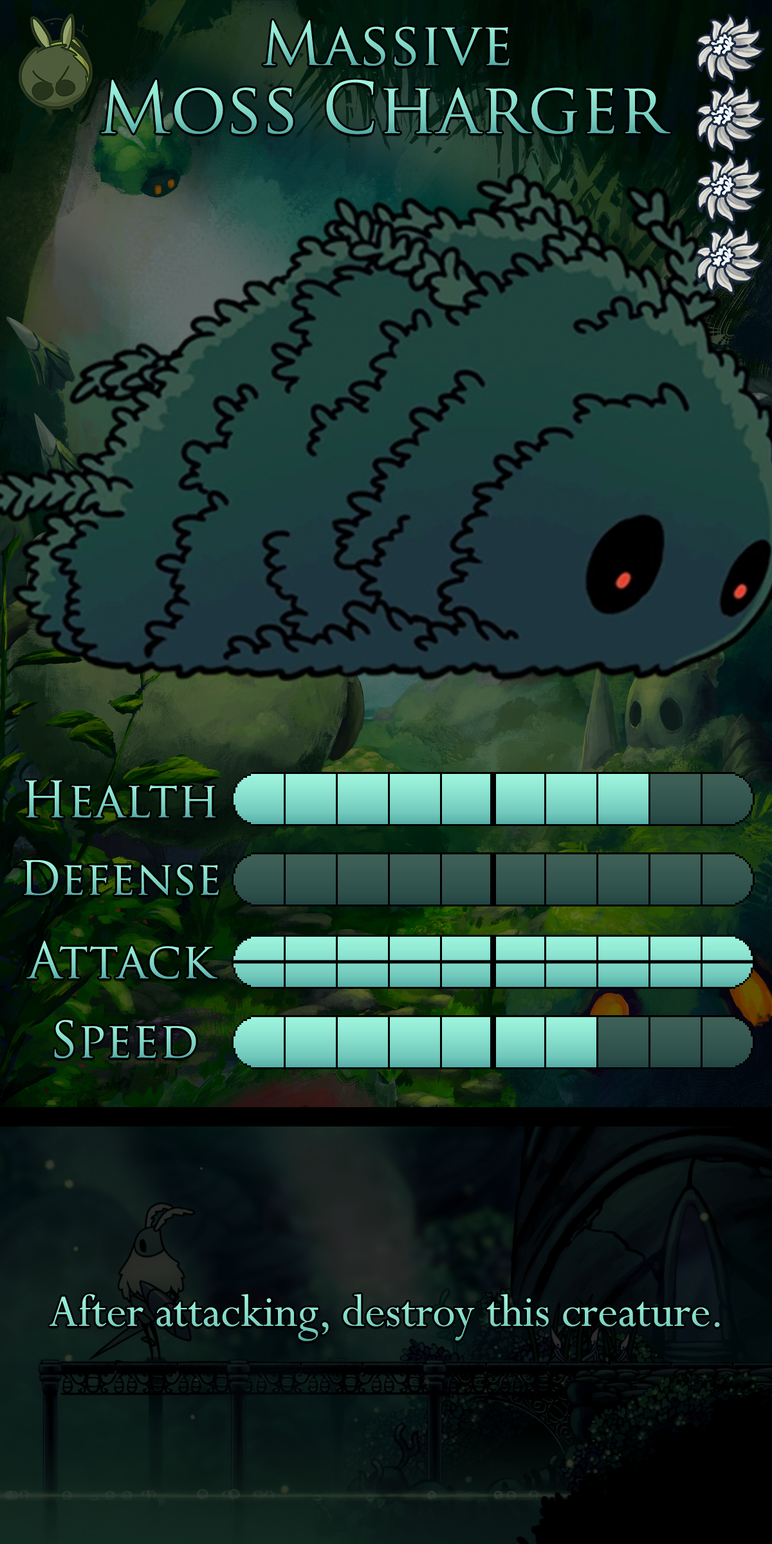
<style>
.page{position:relative;width:772px;height:1544px}
.page>*{position:absolute;margin:0}
.t1{font:100.3px "TrajanPro-Regular"}
.t2{font:119.2px "TrajanPro-Regular"}
.t3{font:83.6px "TrajanPro-Regular"}
.t4{font:78.5px "TrajanPro-Regular"}
.t5{font:86.2px "Perpetua";color:#86ddcb}
</style>
<div class="page">
<p class="t1" style="left:263px;top:20px;width:247px;height:46px">Massive</p>
<p class="t2" style="left:101px;top:79px;width:570px;height:55px">Moss Charger</p>
<p class="t3" style="left:25px;top:781px;width:191px;height:37px">Health</p>
<p class="t4" style="left:23px;top:860px;width:196px;height:36px">Defense</p>
<p class="t3" style="left:26px;top:941px;width:191px;height:38px">Attack</p>
<p class="t3" style="left:54px;top:1020px;width:142px;height:38px">Speed</p>
<p class="t5" style="left:50px;top:1294px;width:670px;height:48px">After attacking, destroy this creature.</p>
</div>
